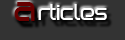
<style>
.page{position:relative;width:125px;height:40px;background:#333333}
.page>*{position:absolute;margin:0}
.t1{font:20px "BirdmanBold";color:#ffffff}
.t2{font:11px "BirdmanBold";color:#650000}
.t3{font:30px "BirdmanBold";color:#650000}
</style>
<div class="page">
<p class="t1" style="left:14px;top:2px;width:93px;height:19px"><span class="t2">  </span><span class="t3">A</span>rticles</p>
</div>
